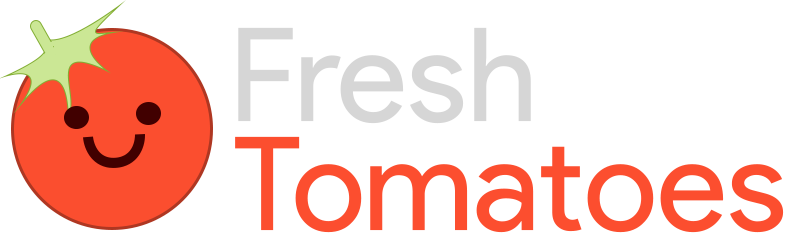
<style>
.page{position:relative;width:790px;height:240px;background:#ffffff}
.page>*{position:absolute;margin:0}
.t1{font:130px "ProductSans-Regular";color:#d6d6d6}
.t2{font:130px "ProductSans-Regular";color:#fc4f2f}
</style>
<div class="page">
<p class="t1" style="left:238px;top:27px;width:293px;height:97px">Fresh</p>
<p class="t2" style="left:235px;top:136px;width:549px;height:97px">Tomatoes</p>
</div>
